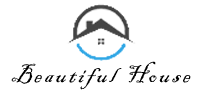
<style>
.page{position:relative;width:200px;height:100px;background:#ffffff}
.page>*{position:absolute;margin:0}
.t1{font:24.5px "BlackadderITC-Regular";letter-spacing:0.1em;color:#000000;font-style:italic}
</style>
<div class="page">
<p class="t1" style="left:11px;top:61px;width:180px;height:29px">Beautiful House</p>
</div>
